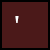
<style>
.page{position:relative;width:50px;height:50px;background:#4b1919}
.page>*{position:absolute;margin:0}
.t1{font:24px "H2gtrE";color:#ffffff}
</style>
<div class="page">
<p class="t1" style="left:15px;top:16px;width:4px;height:7px">'</p>
</div>
